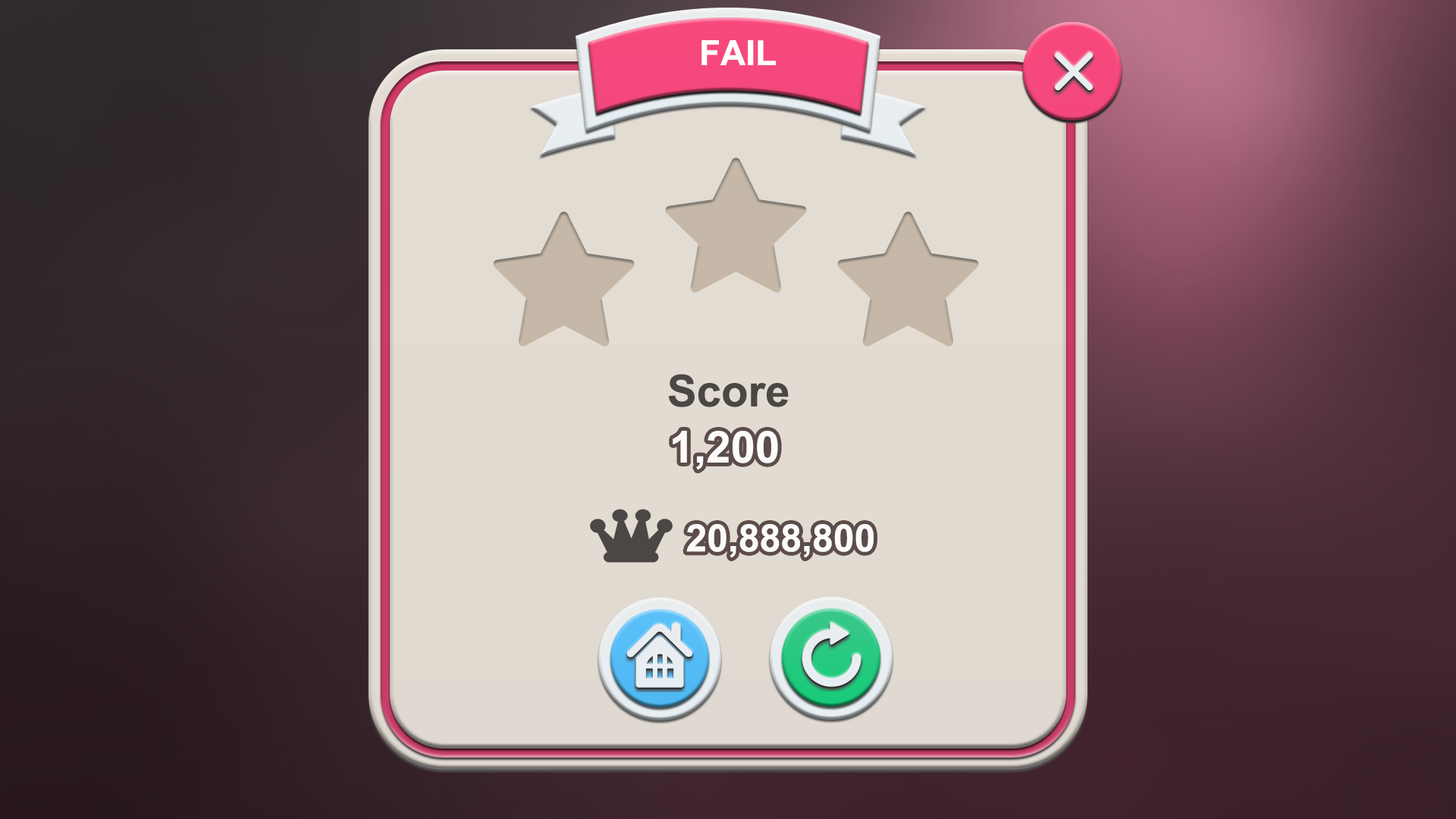
<style>
.page{position:relative;width:1456px;height:819px}
.page>*{position:absolute;margin:0}
.t1{font:34.9px "Arial-BoldMT";color:#ffffff}
.t2{font:44px "Arial-BoldMT";color:#4a4744}
.t3{font:44px "Arial-BoldMT";color:#ffffff}
.t4{font:37.9px "Arial-BoldMT";color:#ffffff}
</style>
<div class="page">
<p class="t1" style="left:701px;top:40px;width:75px;height:25px">FAIL</p>
<p class="t2" style="left:668px;top:374px;width:121px;height:33px">Score</p>
<p class="t3" style="left:673px;top:431px;width:105px;height:39px">1,200</p>
<p class="t4" style="left:686px;top:524px;width:188px;height:34px">20,888,800</p>
</div>
